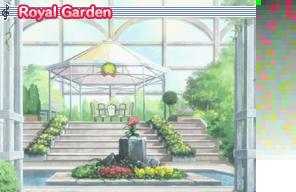
<style>
.page{position:relative;width:296px;height:192px}
.page>*{position:absolute;margin:0}
.t1{font:12px "HummingStd-E";letter-spacing:0.02em}
</style>
<div class="page">
<p class="t1" style="left:19px;top:6px;width:92px;height:14px">Royal Garden</p>
</div>
